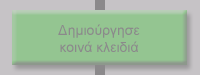
<style>
.page{position:relative;width:200px;height:75px;background:#94c591}
.page>*{position:absolute;margin:0}
.t1{font:14px "ArialMT";color:#8b898b}
</style>
<div class="page">
<p class="t1" style="left:58px;top:24px;width:82px;height:28px;text-align:center">Δημιούργησε<br>κοινά κλειδιά</p>
</div>
